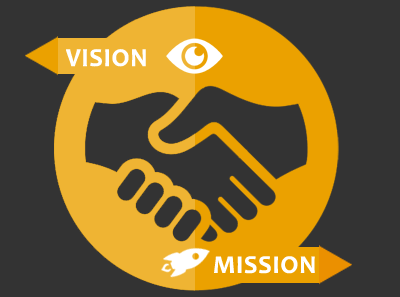
<style>
.page{position:relative;width:400px;height:297px;background:#333333}
.page>*{position:absolute;margin:0}
.t1{font:25.9px "Candara-Bold";color:#ffffff;font-weight:bold}
</style>
<div class="page">
<p class="t1" style="left:66px;top:49px;width:80px;height:18px">VISION</p>
<p class="t1" style="left:214px;top:256px;width:101px;height:18px">MISSION</p>
</div>
